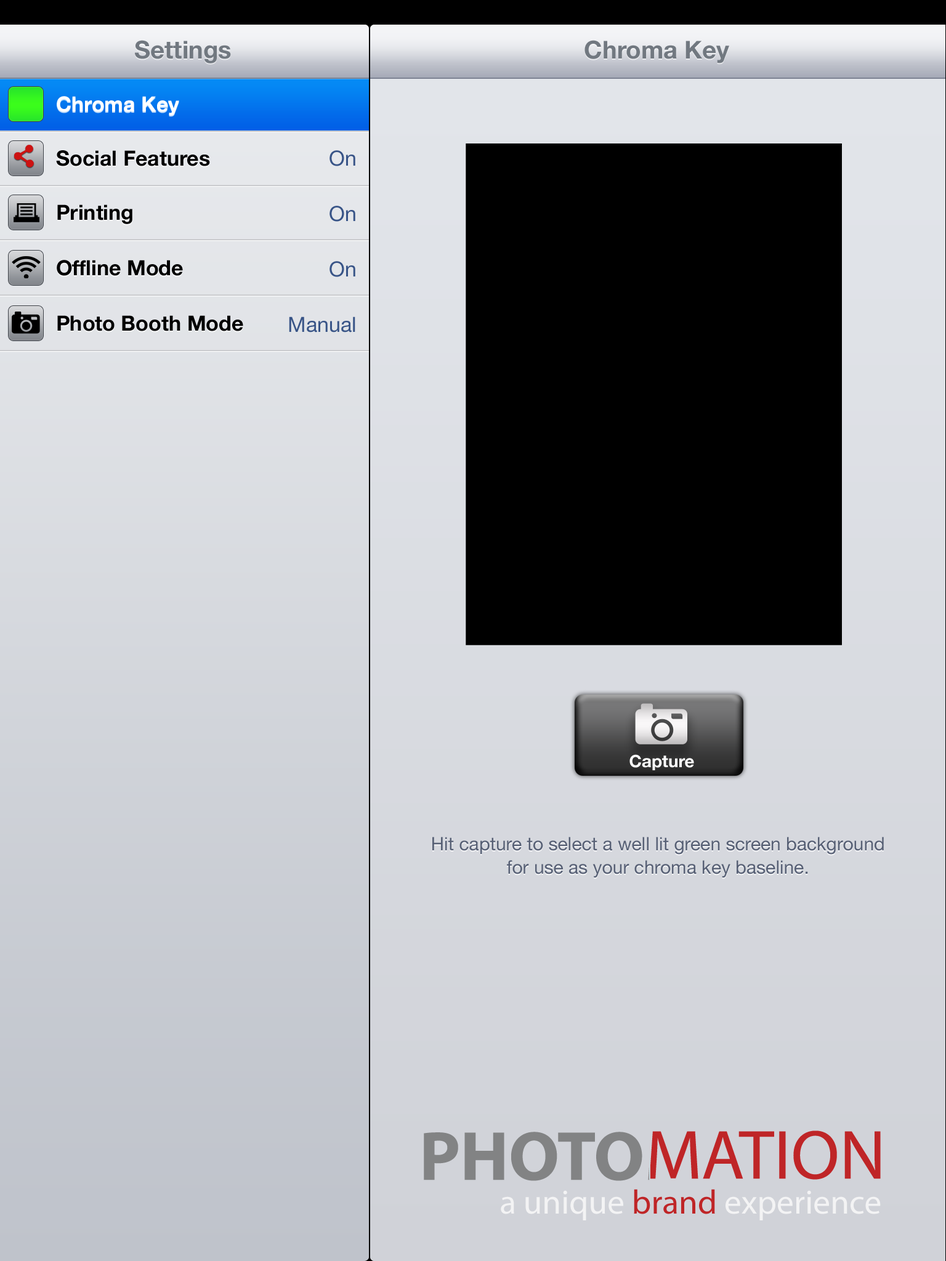
<style>
.page{position:relative;width:946px;height:1261px}
.page>*{position:absolute;margin:0}
.t1{font:24.6px "HelveticaNeue-Bold";color:#717880}
.t2{font:20.9px "HelveticaNeue-Bold";color:#ffffff}
.t3{font:20.9px "HelveticaNeue-Bold";color:#000000}
.t4{font:20.9px "HelveticaNeue";color:#385487}
.t5{font:17.1px "HelveticaNeue-Bold";color:#ffffff}
.t6{font:18.5px/23.4px "HelveticaNeue";color:#576075}
</style>
<div class="page">
<p class="t1" style="left:135px;top:40px;width:96px;height:23px">Settings</p>
<p class="t1" style="left:584px;top:40px;width:145px;height:23px">Chroma Key</p>
<p class="t2" style="left:57px;top:96px;width:122px;height:20px">Chroma Key</p>
<p class="t3" style="left:56px;top:150px;width:154px;height:16px">Social Features</p>
<p class="t4" style="left:329px;top:150px;width:26px;height:16px">On</p>
<p class="t3" style="left:57px;top:204px;width:75px;height:20px">Printing</p>
<p class="t4" style="left:329px;top:206px;width:26px;height:16px">On</p>
<p class="t3" style="left:57px;top:260px;width:126px;height:16px">Offline Mode</p>
<p class="t4" style="left:329px;top:261px;width:26px;height:16px">On</p>
<p class="t3" style="left:57px;top:315px;width:186px;height:16px">Photo Booth Mode</p>
<p class="t4" style="left:289px;top:316px;width:66px;height:16px">Manual</p>
<p class="t5" style="left:629px;top:754px;width:65px;height:16px">Capture</p>
<p class="t6" style="left:432px;top:837px;width:452px;height:41px;text-align:center">Hit capture to select a well lit green screen background<br>for use as your chroma key baseline.</p>
</div>
